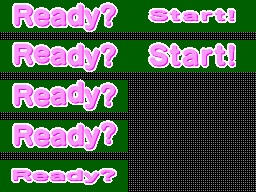
<style>
.page{position:relative;width:256px;height:192px;background:#000000}
.page>*{position:absolute;margin:0}
.t1{font:26px/40px "SeuratPro-EB";color:#f898f8}
.t2{font:26px "SeuratPro-EB";letter-spacing:0.075em;color:#f898f8}
</style>
<div class="page">
<p class="t1" style="left:14px;top:4px;width:101px;height:145px;text-align:center">Ready?<br>Ready?<br>Ready?<br>Ready?</p>
<p class="t2" style="left:149px;top:44px;width:85px;height:22px">Start!</p>
</div>
